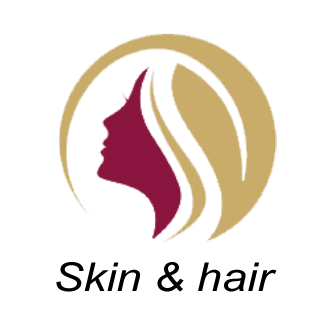
<style>
.page{position:relative;width:328px;height:328px;background:#ffffff}
.page>*{position:absolute;margin:0}
.t1{font:39.7px "Arial-ItalicMT";color:#000000;scale:1.14 1}
</style>
<div class="page">
<p class="t1" style="left:56px;top:262px;width:221px;height:30px">Skin &amp; hair</p>
</div>
